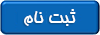
<style>
.page{position:relative;width:100px;height:35px;background:#0966b6}
.page>*{position:absolute;margin:0}
.t1{font:18.7px "BHoma";color:#fefefe}
</style>
<div class="page">
<p class="t1" style="left:24px;top:9px;width:52px;height:17px">ثبت نام</p>
</div>
